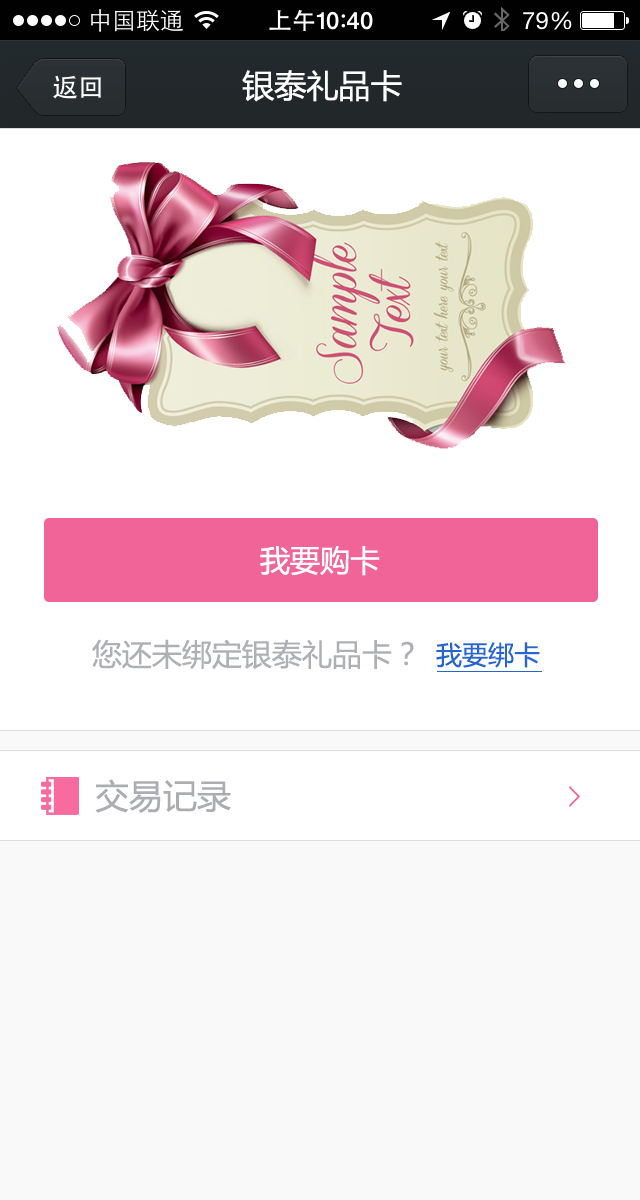
<style>
.page{position:relative;width:640px;height:1200px;background:#ffffff}
.page>*{position:absolute;margin:0}
.t1{font:32px "MicrosoftYaHei";color:#ffffff}
.t2{font:30px "MicrosoftYaHei";color:#ffffff}
.t3{font:30px "MicrosoftYaHei";color:#aeb0b5}
.t4{font:26px "MicrosoftYaHei";color:#2466d2}
.t5{font:34px "MicrosoftYaHei";color:#abadb3}
</style>
<div class="page">
<p class="t1" style="left:242px;top:70px;width:160px;height:32px">银泰礼品卡</p>
<p class="t2" style="left:260px;top:546px;width:120px;height:30px">我要购卡</p>
<p class="t3" style="left:92px;top:639px;width:322px;height:31px">您还未绑定银泰礼品卡？</p>
<p class="t4" style="left:436px;top:642px;width:104px;height:26px">我要绑卡</p>
<p class="t5" style="left:95px;top:779px;width:136px;height:34px">交易记录</p>
</div>
